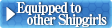
<style>
.page{position:relative;width:112px;height:28px}
.page>*{position:absolute;margin:0}
.t1{font:15px/13px "RyuminPro-ExBold";letter-spacing:-0.08em;color:#ffffff;scale:0.9 1}
</style>
<div class="page">
<p class="t1" style="left:6px;top:2px;width:101px;height:25px">▶Equipped to<br>       other Shipgirls</p>
</div>
